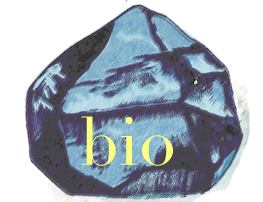
<style>
.page{position:relative;width:263px;height:202px;background:#ffffff}
.page>*{position:absolute;margin:0}
.t1{font:66.7px "Didot";color:#ffff80}
</style>
<div class="page">
<p class="t1" style="left:81px;top:116px;width:92px;height:50px">bio</p>
</div>
